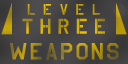
<style>
.page{position:relative;width:128px;height:64px}
.page>*{position:absolute;margin:0}
.t1{font:15px/19px "USAAF_Stencil";letter-spacing:0.54em}
.t2{font:21px/19px "USAAF_Stencil";letter-spacing:0.32em}
.t3{font:23px "USAAF_Stencil";letter-spacing:0.12em}
</style>
<div class="page">
<p class="t1" style="left:22px;top:4px;width:83px;height:30px;text-align:center">LEVEl<br><span class="t2">THREE</span></p>
<p class="t3" style="left:9px;top:43px;width:110px;height:17px">weapons</p>
</div>
